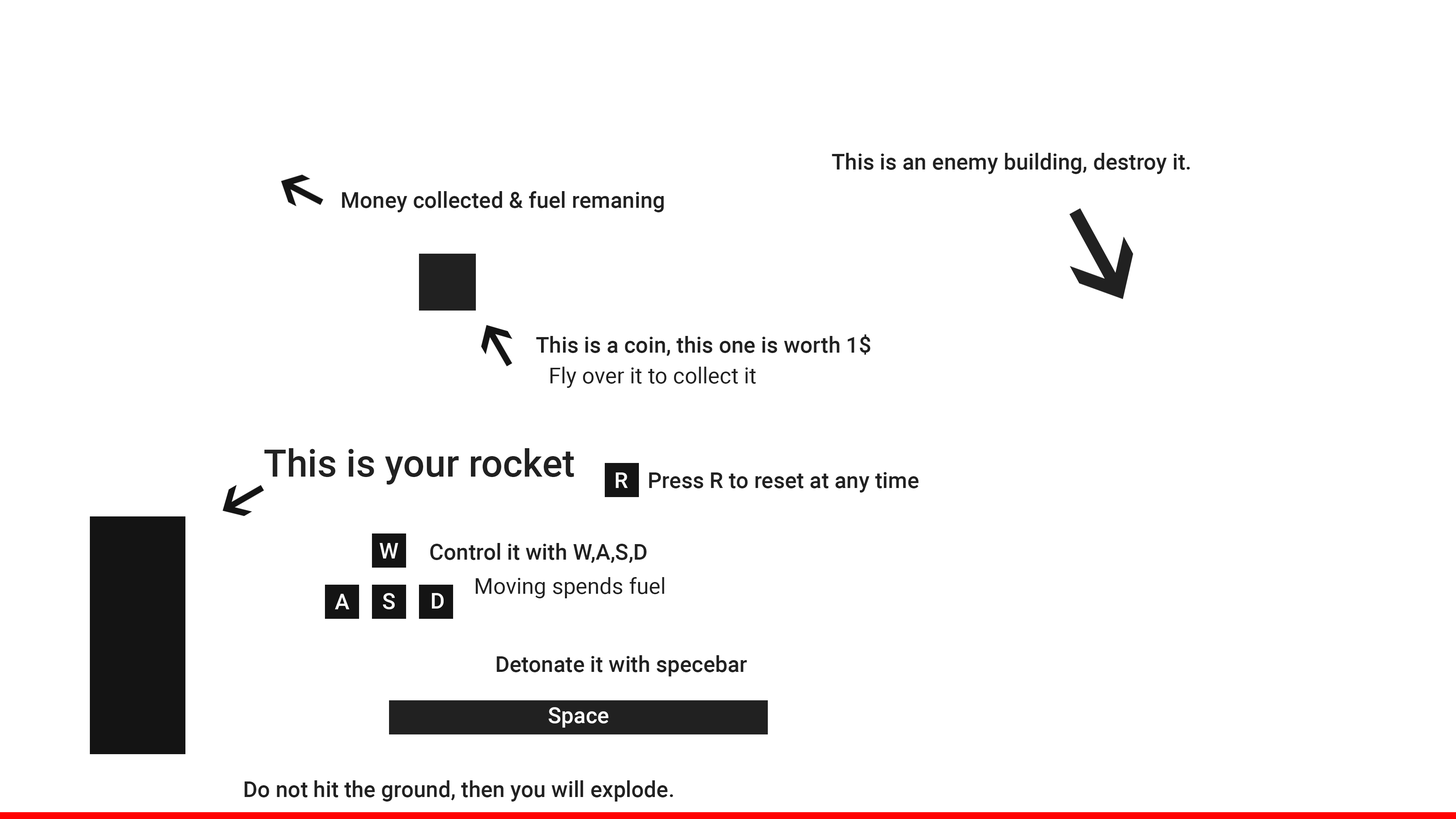
<style>
.page{position:relative;width:1456px;height:819px;background:#ffffff}
.page>*{position:absolute;margin:0}
.t1{font:22.1px "Roboto-Medium";color:#212121}
.t2{font:22.1px "Roboto-Regular";color:#212121}
.t3{font:37.9px "Roboto-Medium";color:#212121}
.t4{font:22.1px "Roboto-Medium";color:#fafafa}
</style>
<div class="page">
<p class="t1" style="left:832px;top:153px;width:358px;height:21px">This is an enemy building, destroy it.</p>
<p class="t1" style="left:342px;top:191px;width:322px;height:21px">Money collected &amp; fuel remaning</p>
<p class="t1" style="left:536px;top:334px;width:335px;height:22px">This is a coin, this one is worth 1$</p>
<p class="t2" style="left:550px;top:367px;width:206px;height:21px">Fly over it to collect it</p>
<p class="t3" style="left:264px;top:448px;width:310px;height:37px">This is your rocket</p>
<p class="t4" style="left:616px;top:472px;width:12px;height:16px">R</p>
<p class="t1" style="left:649px;top:472px;width:270px;height:21px">Press R to reset at any time</p>
<p class="t4" style="left:380px;top:543px;width:18px;height:16px">W</p>
<p class="t1" style="left:430px;top:543px;width:216px;height:20px">Control it with W,A,S,D</p>
<p class="t2" style="left:475px;top:577px;width:189px;height:21px">Moving spends fuel</p>
<p class="t4" style="left:335px;top:594px;width:15px;height:15px">A</p>
<p class="t4" style="left:383px;top:593px;width:12px;height:16px">S</p>
<p class="t4" style="left:432px;top:593px;width:12px;height:16px">D</p>
<p class="t1" style="left:497px;top:655px;width:250px;height:21px">Detonate it with specebar</p>
<p class="t4" style="left:549px;top:707px;width:60px;height:21px">Space</p>
<p class="t1" style="left:245px;top:780px;width:428px;height:22px">Do not hit the ground, then you will explode.</p>
</div>
